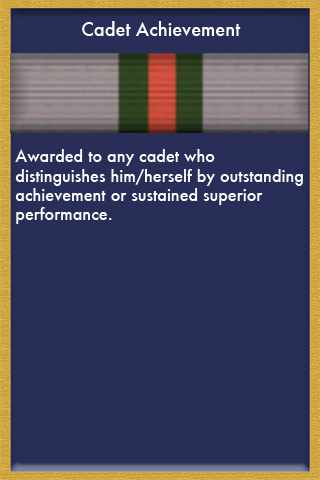
<style>
.page{position:relative;width:320px;height:480px;background:#292e59}
.page>*{position:absolute;margin:0}
.t1{font:18px "Futura-Medium";color:#ffffff}
.t2{font:16px "Futura-Medium";color:#ffffff}
</style>
<div class="page">
<p class="t1" style="left:82px;top:21px;width:159px;height:15px">Cadet Achievement</p>
<p class="t2" style="left:15px;top:149px;width:288px;height:75px">Awarded to any cadet who <br>distinguishes him/herself by outstanding <br>achievement or sustained superior <br>performance.</p>
</div>
